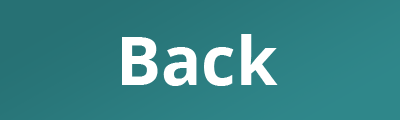
<style>
.page{position:relative;width:400px;height:120px}
.page>*{position:absolute;margin:0}
.t1{font:66.7px "NotoSans-Bold";color:#ffffff}
</style>
<div class="page">
<p class="t1" style="left:122px;top:34px;width:156px;height:52px">Back</p>
</div>
